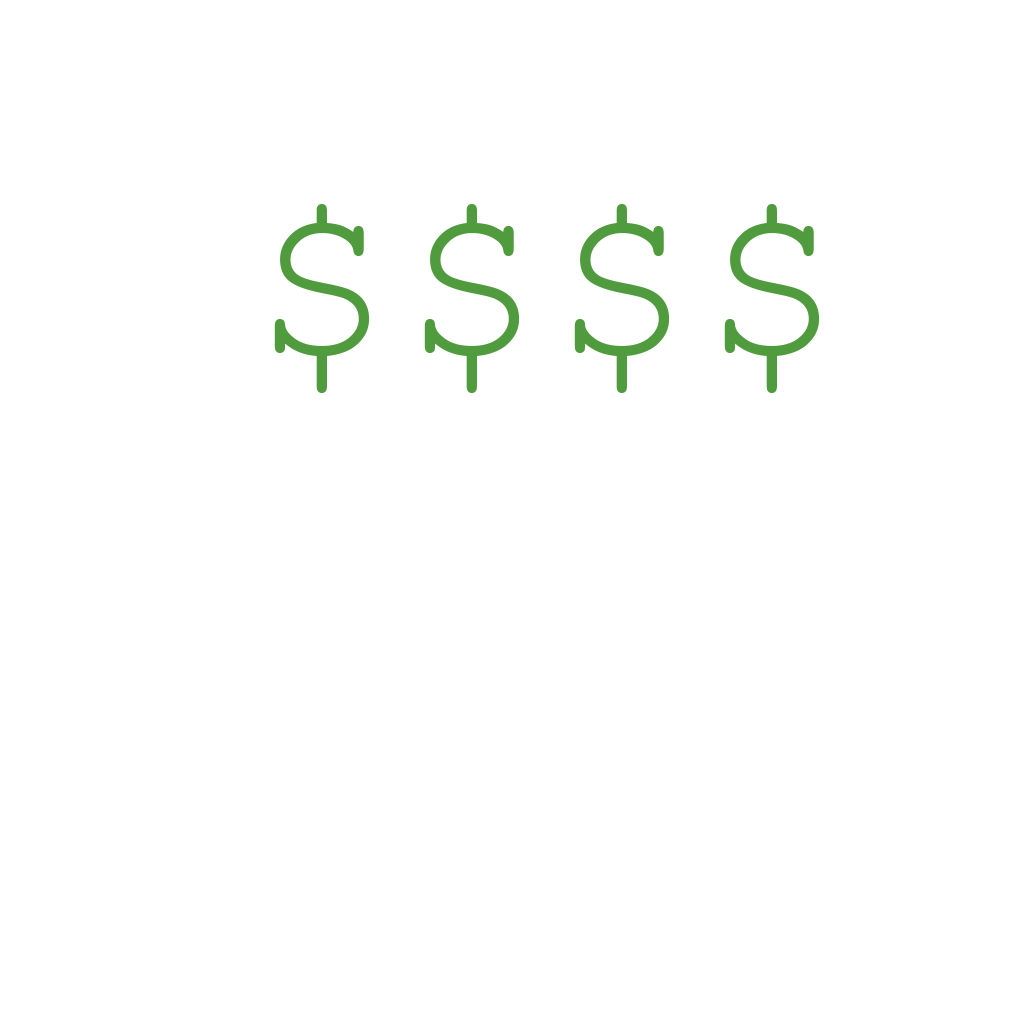
<style>
.page{position:relative;width:1024px;height:1024px;background:#ffffff}
.page>*{position:absolute;margin:0}
.t1{font:250px "CourierNewPSMT";color:#519b3f}
</style>
<div class="page">
<p class="t1" style="left:274px;top:204px;width:546px;height:189px">$$$$</p>
</div>
